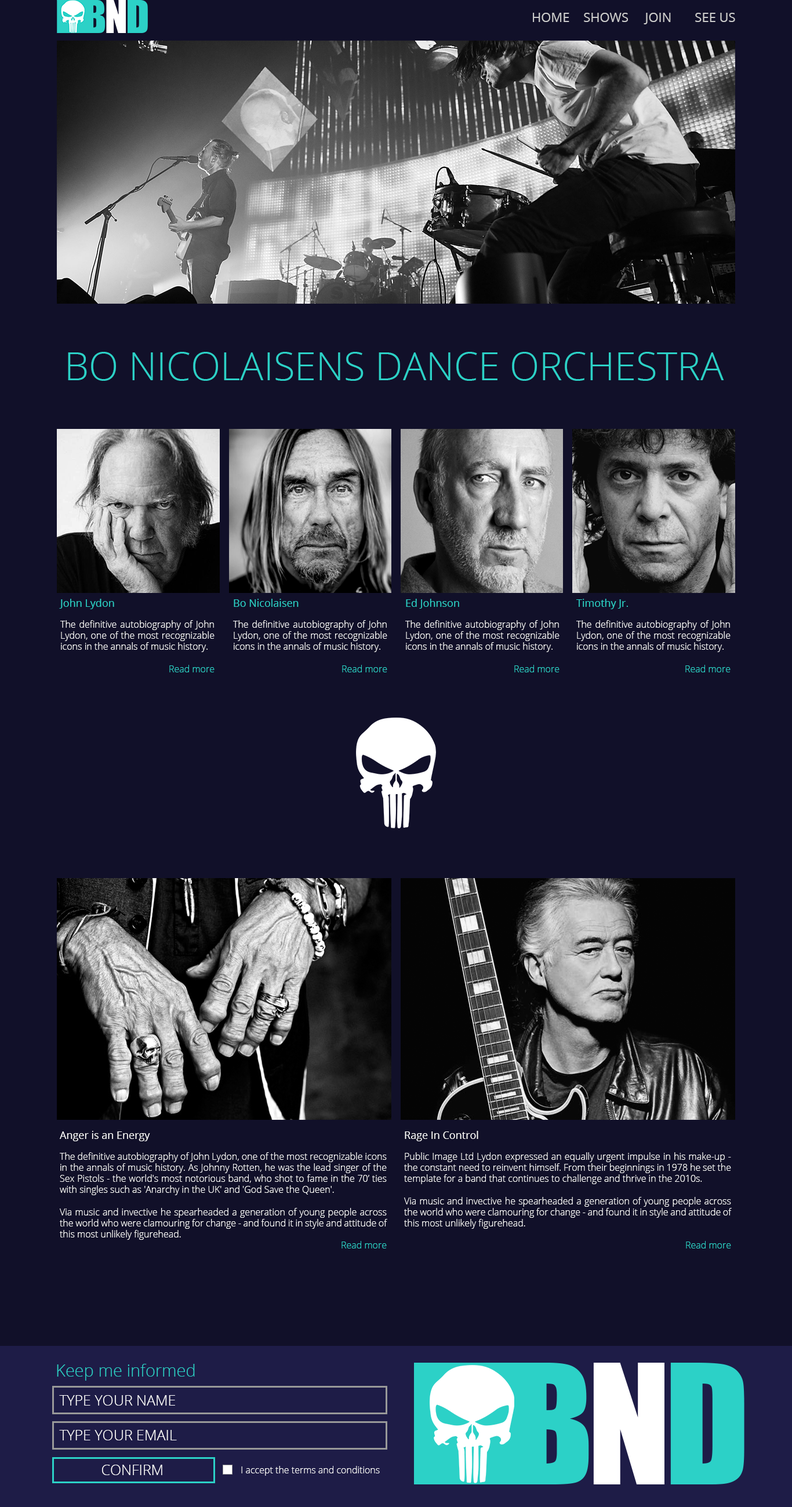
<style>
.page{position:relative;width:792px;height:1507px;background:#111029}
.page>*{position:absolute;margin:0}
.t1{font:12.7px "OpenSans";color:#cccccc}
.t2{font:38.8px "OpenSans-Light";color:#2cd1c7}
.t3{font:9.3px "OpenSans-Light";color:#ffffff}
.t4{font:10.4px "OpenSans";color:#2cd1c7}
.t5{font:9.3px "OpenSans-Light";color:#2cd1c7}
.t6{font:10.4px "OpenSans";color:#ffffff}
.t7{font:16.8px "OpenSans-Light";color:#2cd1c7}
.t8{font:14.5px "OpenSans-Light";color:#ffffff}
</style>
<div class="page">
<p class="t1" style="left:533px;top:13px;width:202px;height:11px">HOME    SHOWS     JOIN       SEE US</p>
<p class="t2" style="left:68px;top:352px;width:656px;height:29px">BO NICOLAISENS DANCE ORCHESTRA</p>
<p class="t3" style="left:59px;top:599px;width:155px;height:73px"><span class="t4">John Lydon<br><br></span>The definitive autobiography of John Lydon, one of the most recognizable icons in the annals of music history. <br><br><span class="t5">Read more</span></p>
<p class="t3" style="left:233px;top:599px;width:154px;height:73px"><span class="t4">Bo Nicolaisen<br><br></span>The definitive autobiography of John Lydon, one of the most recognizable icons in the annals of music history. <br><br><span class="t5">Read more</span></p>
<p class="t3" style="left:405px;top:599px;width:154px;height:73px"><span class="t4">Ed Johnson<br><br></span>The definitive autobiography of John Lydon, one of the most recognizable icons in the annals of music history. <br><br><span class="t5">Read more</span></p>
<p class="t3" style="left:576px;top:599px;width:154px;height:73px"><span class="t4">Timothy Jr.<br><br></span>The definitive autobiography of John Lydon, one of the most recognizable icons in the annals of music history. <br><br><span class="t5">Read more</span></p>
<p class="t3" style="left:60px;top:1130px;width:327px;height:118px"><span class="t6">Anger is an Energy<br><br></span>The definitive autobiography of John Lydon, one of the most recognizable icons in the annals of music history. As Johnny Rotten, he was the lead singer of the Sex Pistols - the world's most notorious band, who shot to fame in the 70’ ties with singles such as 'Anarchy in the UK' and 'God Save the Queen'.<br><br>Via music and invective he spearheaded a generation of young people across the world who were clamouring for change - and found it in style and attitude of this most unlikely figurehead.<br><span class="t5">Read more</span></p>
<p class="t3" style="left:404px;top:1130px;width:327px;height:118px"><span class="t6">Rage In Control<br><br></span>Public Image Ltd Lydon expressed an equally urgent impulse in his make-up - the constant need to reinvent himself. From their beginnings in 1978 he set the template for a band that continues to challenge and thrive in the 2010s.<br><br>Via music and invective he spearheaded a generation of young people across the world who were clamouring for change - and found it in style and attitude of this most unlikely figurehead.<br><br><span class="t5">Read more</span></p>
<p class="t7" style="left:57px;top:1363px;width:138px;height:17px">Keep me informed</p>
<p class="t8" style="left:59px;top:1395px;width:118px;height:80px">TYPE YOUR NAME<br><br>TYPE YOUR EMAIL<br><br>  CONFIRM</p>
<p class="t3" style="left:241px;top:1465px;width:139px;height:10px">I accept the terms and conditions</p>
</div>
